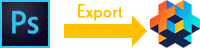
<style>
.page{position:relative;width:200px;height:48px;background:#ffffff}
.page>*{position:absolute;margin:0}
.t1{font:18px "SuperGroteskOffcPro";color:#ffc000;font-weight:bold}
</style>
<div class="page">
<p class="t1" style="left:78px;top:4px;width:45px;height:17px">Export</p>
</div>
